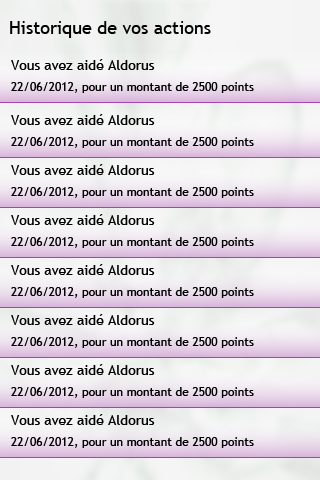
<style>
.page{position:relative;width:320px;height:480px}
.page>*{position:absolute;margin:0}
.t1{font:18px "TrebuchetMS";color:#000000}
.t2{font:14px "TrebuchetMS";color:#000000}
.t3{font:12px "TrebuchetMS";color:#000000}
</style>
<div class="page">
<p class="t1" style="left:10px;top:21px;width:201px;height:17px">Historique de vos actions</p>
<p class="t2" style="left:11px;top:59px;width:144px;height:11px">Vous avez aidé Aldorus</p>
<p class="t3" style="left:11px;top:82px;width:243px;height:11px">22/06/2012, pour un montant de 2500 points</p>
<p class="t2" style="left:11px;top:114px;width:144px;height:11px">Vous avez aidé Aldorus</p>
<p class="t3" style="left:11px;top:137px;width:243px;height:11px">22/06/2012, pour un montant de 2500 points</p>
<p class="t2" style="left:11px;top:164px;width:144px;height:11px">Vous avez aidé Aldorus</p>
<p class="t3" style="left:11px;top:187px;width:243px;height:11px">22/06/2012, pour un montant de 2500 points</p>
<p class="t2" style="left:11px;top:214px;width:144px;height:11px">Vous avez aidé Aldorus</p>
<p class="t3" style="left:11px;top:237px;width:243px;height:11px">22/06/2012, pour un montant de 2500 points</p>
<p class="t2" style="left:11px;top:264px;width:144px;height:11px">Vous avez aidé Aldorus</p>
<p class="t3" style="left:11px;top:287px;width:243px;height:11px">22/06/2012, pour un montant de 2500 points</p>
<p class="t2" style="left:11px;top:314px;width:144px;height:11px">Vous avez aidé Aldorus</p>
<p class="t3" style="left:11px;top:337px;width:243px;height:11px">22/06/2012, pour un montant de 2500 points</p>
<p class="t2" style="left:11px;top:364px;width:144px;height:11px">Vous avez aidé Aldorus</p>
<p class="t3" style="left:11px;top:387px;width:243px;height:11px">22/06/2012, pour un montant de 2500 points</p>
<p class="t2" style="left:11px;top:414px;width:144px;height:11px">Vous avez aidé Aldorus</p>
<p class="t3" style="left:11px;top:437px;width:243px;height:11px">22/06/2012, pour un montant de 2500 points</p>
</div>
